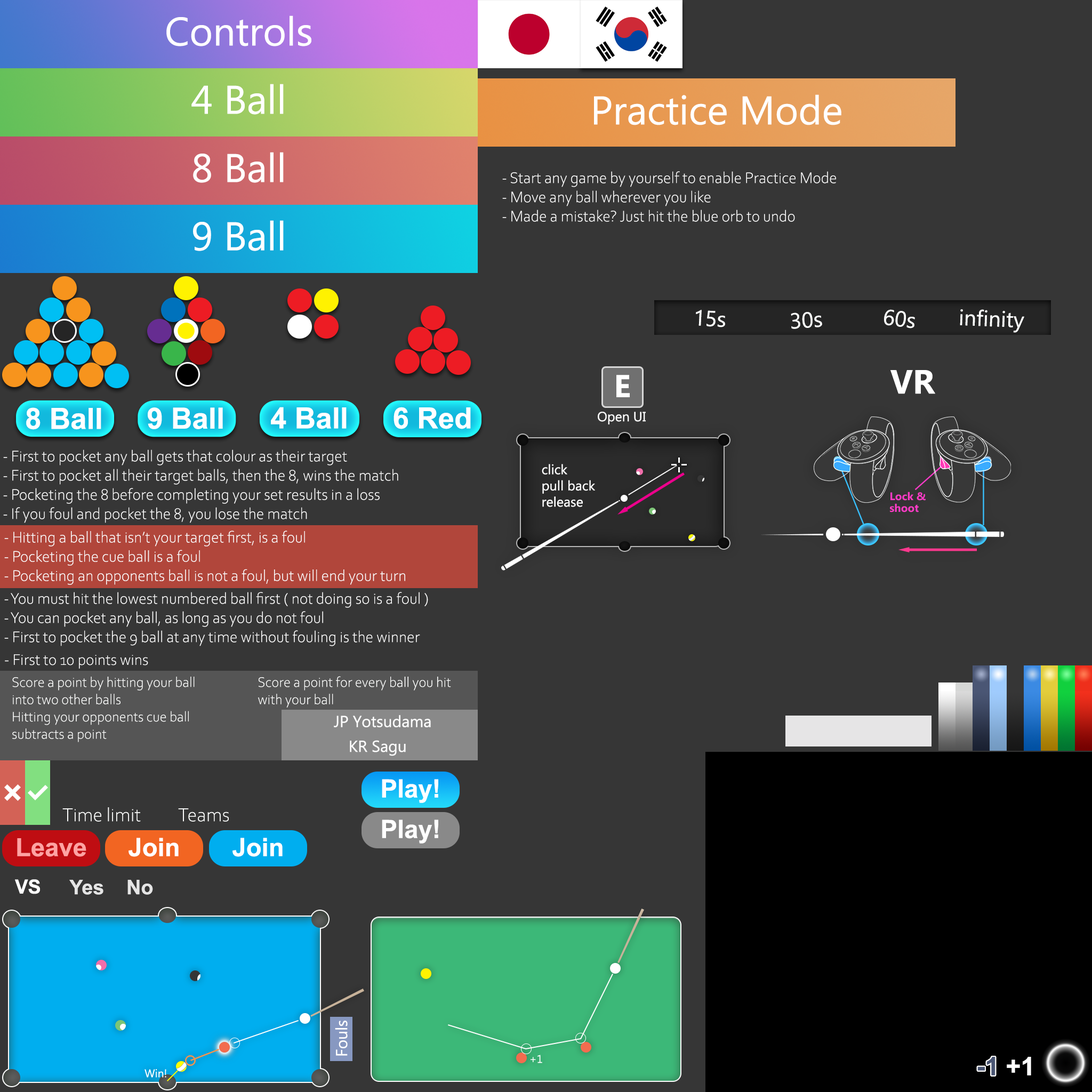
<style>
.page{position:relative;width:1092px;height:1092px;background:#363636}
.page>*{position:absolute;margin:0}
.t1{font:40px "MicrosoftTaiLe";color:#ffffff}
.t2{font:16px "CorbelLight";color:#ffffff}
.t3{font:21.8px "Ebrima";color:#fefffe}
.t4{font:31.5px "MicrosoftTaiLe-Bold";color:#ffffff}
.t5{font:33.6px "MicrosoftTaiLe-Bold";color:#ffffff}
.t6{font:29.3px "Arial-BoldMT";color:#ffffff}
.t7{font:29.2px "Arial-BoldMT";color:#ffffff}
.t8{font:13.3px "MicrosoftTaiLe";color:#ffffff}
.t9{font:13.5px "MicrosoftTaiLe";color:#ffffff}
.t10{font:11px/3.8px "Ebrima-Bold";color:#ff3bc6}
.t11{font:14.4px "CorbelLight";color:#fefffe}
.t12{font:16px "MicrosoftTaiLe";color:#ffffff}
.t13{font:25.3px "Arial-BoldMT";color:#ffffff}
.t14{font:19.5px "CorbelLight";color:#fefffe}
.t15{font:25.3px "Arial-BoldMT";color:#ffa3a3}
.t16{font:19.4px "Arial-BoldMT";color:#ffffff}
.t17{font:20.1px "Arial-BoldMT";color:#e5e5e5}
.t18{font:11px "MicrosoftTaiLe";color:#ffffff}
.t19{font:25.6px "Arial-BoldMT";color:#ffffff}
.t20{font:11.1px "MicrosoftTaiLe";color:#ffffff}
</style>
<div class="page">
<p class="t1" style="left:166px;top:15px;width:145px;height:31px">Controls</p>
<p class="t1" style="left:191px;top:84px;width:93px;height:31px">4 Ball</p>
<p class="t1" style="left:594px;top:94px;width:247px;height:31px">Practice Mode</p>
<p class="t1" style="left:193px;top:152px;width:91px;height:31px">8 Ball</p>
<p class="t2" style="left:502px;top:171px;width:334px;height:51px">- Start any game by yourself to enable Practice Mode<br>- Move any ball wherever you like<br>- Made a mistake? Just hit the blue orb to undo</p>
<p class="t1" style="left:193px;top:220px;width:91px;height:31px">9 Ball</p>
<p class="t3" style="left:696px;top:310px;width:29px;height:17px;rotate:3deg">15s</p>
<p class="t3" style="left:791px;top:312px;width:31px;height:17px;rotate:-4deg">30s</p>
<p class="t3" style="left:884px;top:309px;width:31px;height:19px;rotate:7deg">60s</p>
<p class="t3" style="left:960px;top:309px;width:64px;height:24px;rotate:2deg">infinity</p>
<p class="t4" style="left:616px;top:375px;width:14px;height:22px">E</p>
<p class="t5" style="left:890px;top:370px;width:45px;height:24px">VR</p>
<p class="t6" style="left:26px;top:407px;width:75px;height:23px">8 Ball</p>
<p class="t6" style="left:148px;top:407px;width:75px;height:22px">9 Ball</p>
<p class="t7" style="left:271px;top:407px;width:76px;height:22px">4 Ball</p>
<p class="t7" style="left:393px;top:407px;width:78px;height:22px">6 Red</p>
<p class="t8" style="left:598px;top:412px;width:48px;height:12px">Open UI</p>
<p class="t2" style="left:3px;top:449px;width:395px;height:74px">- First to pocket any ball gets that colour as their target<br>- First to pocket all their target balls, then the 8, wins the match<br>- Pocketing the 8 before completing your set results in a loss<br>- If you foul and pocket the 8, you lose the match</p>
<p class="t9" style="left:542px;top:464px;width:53px;height:43px">click<br>pull back<br>release</p>
<p class="t10" style="left:890px;top:492px;width:36px;height:20px">Lock &amp; <br><br><br>shoot</p>
<p class="t2" style="left:4px;top:531px;width:401px;height:54px">- Hitting a ball that isn’t your target first, is a foul<br>- Pocketing the cue ball is a foul<br>- Pocketing an opponents ball is not a foul, but will end your turn</p>
<p class="t2" style="left:4px;top:592px;width:424px;height:54px">- You must hit the lowest numbered ball first ( not doing so is a foul )<br>- You can pocket any ball, as long as you do not foul<br>- First to pocket the 9 ball at any time without fouling is the winner</p>
<p class="t2" style="left:5px;top:654px;width:143px;height:15px">- First to 10 points wins</p>
<p class="t11" style="left:12px;top:677px;width:183px;height:65px">Score a point by hitting your ball into two other balls <br>Hitting your opponents cue ball subtracts a point</p>
<p class="t11" style="left:258px;top:676px;width:193px;height:32px">Score a point for every ball you hit with your ball</p>
<p class="t12" style="left:334px;top:715px;width:97px;height:12px">JP Yotsudama</p>
<p class="t12" style="left:350px;top:740px;width:56px;height:16px">KR Sagu</p>
<p class="t13" style="left:382px;top:779px;width:56px;height:24px">Play!</p>
<p class="t14" style="left:62px;top:807px;width:79px;height:15px">Time limit</p>
<p class="t14" style="left:178px;top:808px;width:51px;height:14px">Teams</p>
<p class="t13" style="left:382px;top:820px;width:56px;height:24px">Play!</p>
<p class="t15" style="left:17px;top:838px;width:69px;height:19px">Leave</p>
<p class="t13" style="left:129px;top:838px;width:50px;height:19px">Join</p>
<p class="t13" style="left:232px;top:838px;width:51px;height:19px">Join</p>
<p class="t16" style="left:15px;top:879px;width:25px;height:15px">VS</p>
<p class="t17" style="left:69px;top:880px;width:84px;height:15px">Yes    No</p>
<p class="t12" style="left:335px;top:1021px;width:13px;height:35px;rotate:-90deg">Fouls</p>
<p class="t18" style="left:531px;top:1055px;width:11px;height:8px">+1</p>
<p class="t19" style="left:1007px;top:1057px;width:24px;height:18px">+1</p>
<p class="t20" style="left:144px;top:1069px;width:22px;height:9px">Win!</p>
</div>
